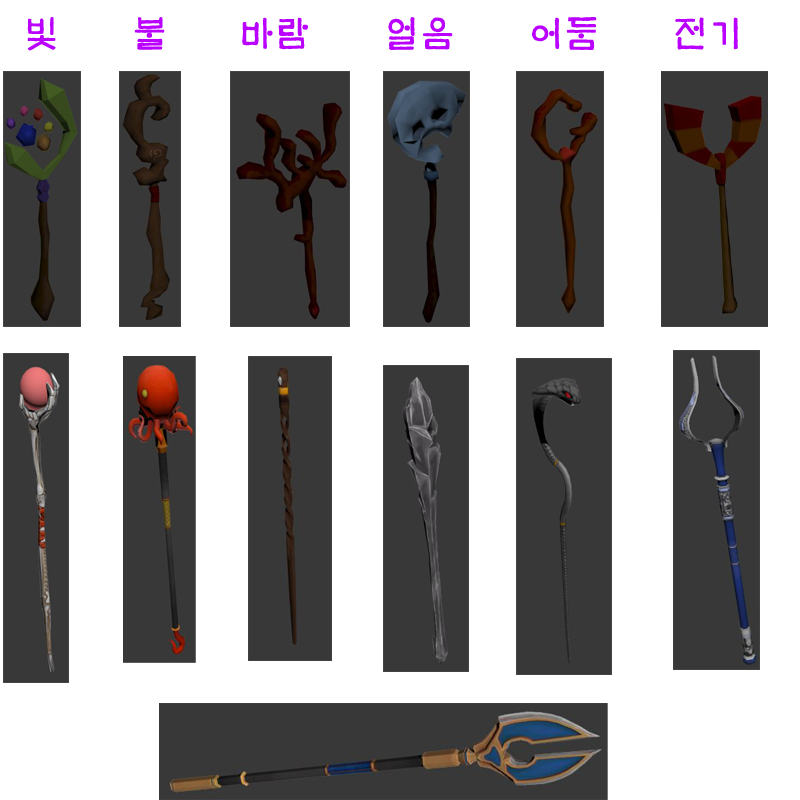
<style>
.page{position:relative;width:800px;height:800px;background:#ffffff}
.page>*{position:absolute;margin:0}
.t1{font:36px "MHunmin";color:#ba00ff}
</style>
<div class="page">
<p class="t1" style="left:27px;top:17px;width:711px;height:34px">빛    불    바람    얼음    어둠    전기</p>
</div>
